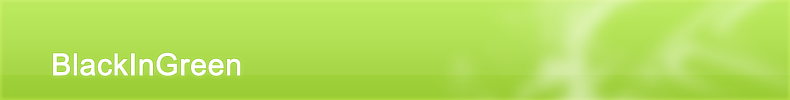
<style>
.page{position:relative;width:790px;height:100px}
.page>*{position:absolute;margin:0}
.t1{font:30px "ArialUnicodeMS";color:#ffffff;font-weight:bold}
</style>
<div class="page">
<p class="t1" style="left:53px;top:52px;width:188px;height:24px">BlackInGreen</p>
</div>
